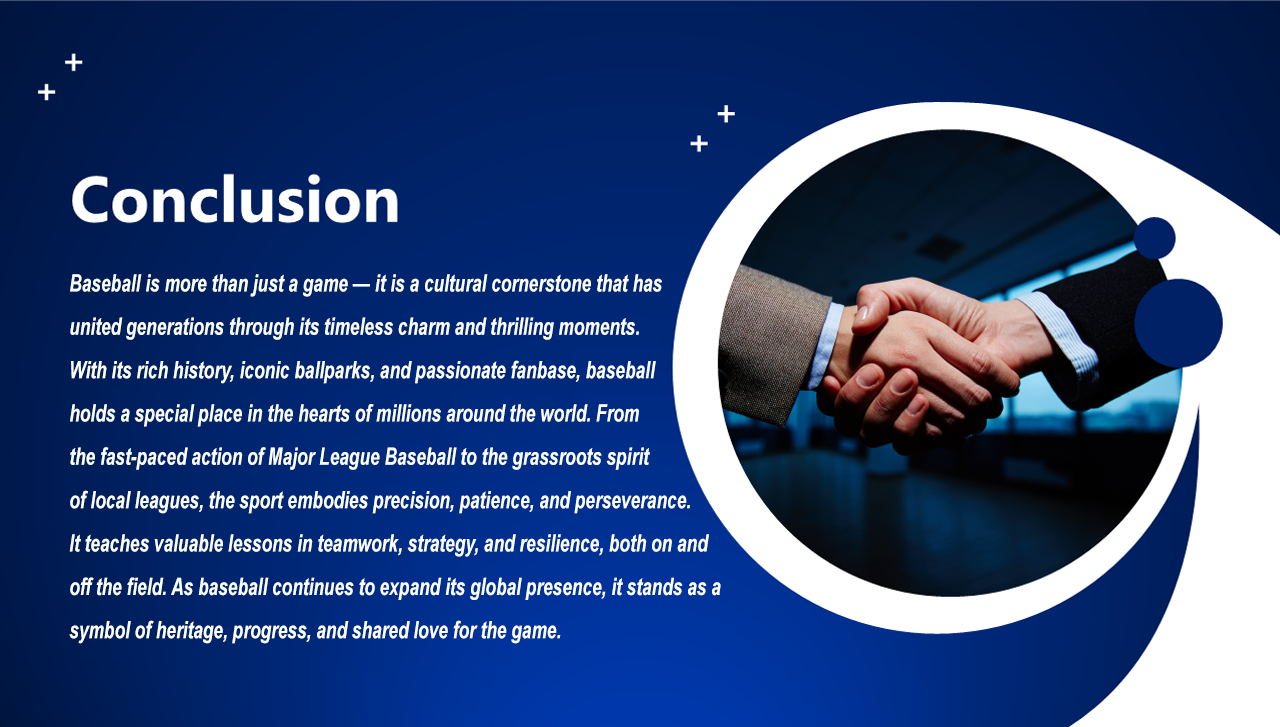
<style>
.page{position:relative;width:1280px;height:727px}
.page>*{position:absolute;margin:0}
.t1{font:24px/43.4px "Arial-BoldItalicMT";color:#fbffff;scale:0.72 1}
</style>
<div class="page">
<p class="t1" style="left:69px;top:274px;width:652px;height:370px">Baseball is more than just a game — it is a cultural cornerstone that has<br>united generations through its timeless charm and thrilling moments. <br>With its rich history, iconic ballparks, and passionate fanbase, baseball <br>holds a special place in the hearts of millions around the world. From <br>the fast-paced action of Major League Baseball to the grassroots spirit <br>of local leagues, the sport embodies precision, patience, and perseverance. <br>It teaches valuable lessons in teamwork, strategy, and resilience, both on and<br>off the field. As baseball continues to expand its global presence, it stands as a <br>symbol of heritage, progress, and shared love for the game.</p>
</div>
